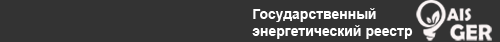
<style>
.page{position:relative;width:500px;height:42px;background:#333333}
.page>*{position:absolute;margin:0}
.t1{font:14px "Arial-BoldMT";color:#ffffff}
</style>
<div class="page">
<p class="t1" style="left:252px;top:8px;width:161px;height:31px">Государственный<br>энергетический реестр</p>
</div>
